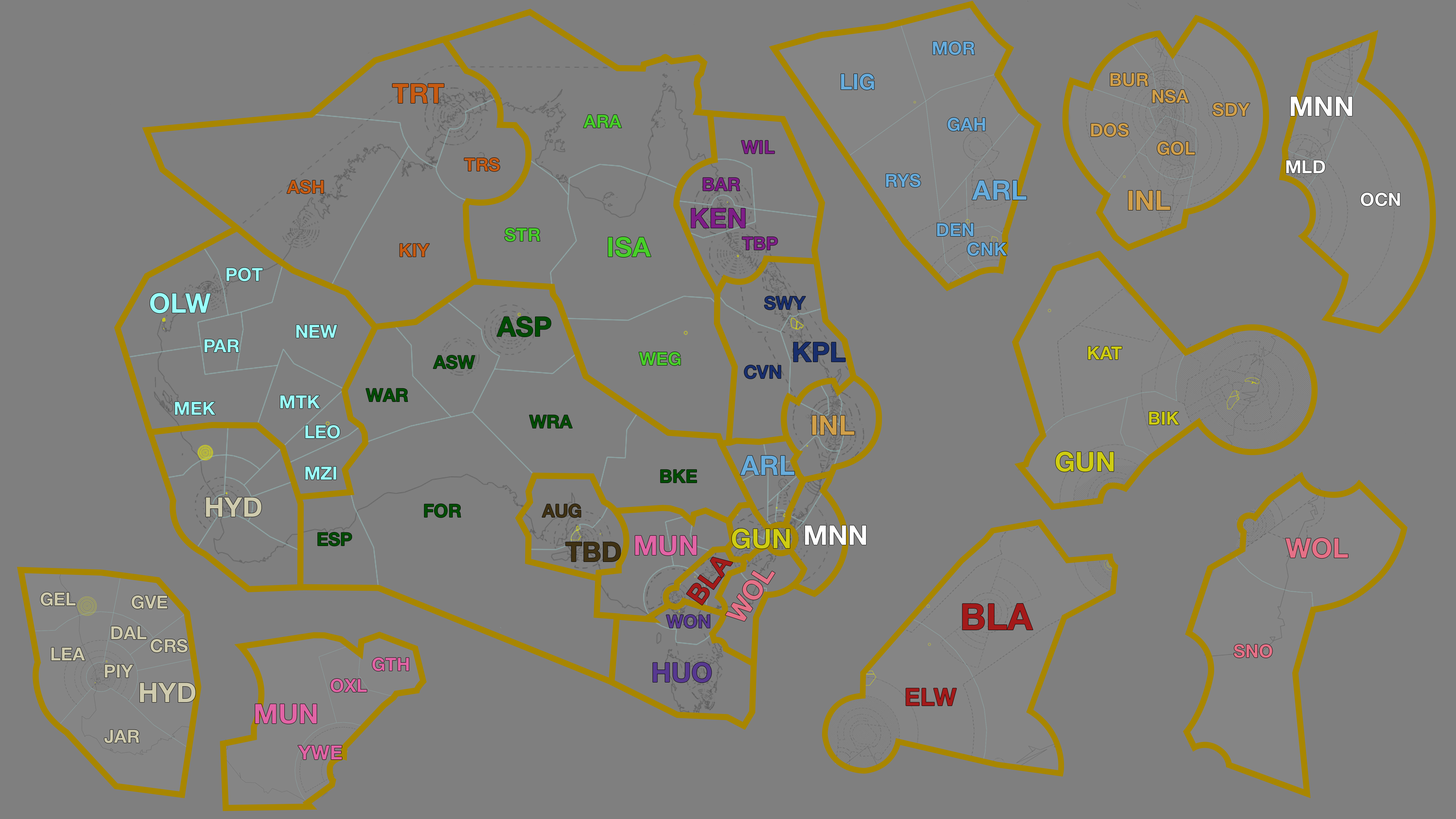
<style>
.page{position:relative;width:1456px;height:819px;background:#7f7f7f}
.page>*{position:absolute;margin:0}
.t1{font:18.2px "HelveticaNeue-Bold";color:#67acdc}
.t2{font:21.8px "HelveticaNeue-Bold";color:#67acdc}
.t3{font:18.2px "HelveticaNeue-Bold";color:#d09f4a}
.t4{font:27.3px "HelveticaNeue-Bold";color:#c75b12}
.t5{font:27.3px "HelveticaNeue-Bold";color:#ffffff}
.t6{font:18.2px "HelveticaNeue-Bold";color:#48cf29}
.t7{font:18.2px "HelveticaNeue-Bold";color:#7e1e87}
.t8{font:18.2px "HelveticaNeue-Bold";color:#c75b12}
.t9{font:18.2px "HelveticaNeue-Bold";color:#ffffff}
.t10{font:27.3px "HelveticaNeue-Bold";color:#67acdc}
.t11{font:27.3px "HelveticaNeue-Bold";color:#d09f4a}
.t12{font:27.3px "HelveticaNeue-Bold";color:#7e1e87}
.t13{font:27.3px "HelveticaNeue-Bold";color:#48cf29}
.t14{font:18.2px "HelveticaNeue-Bold";color:#9afffb}
.t15{font:27.3px "HelveticaNeue-Bold";color:#9afffb}
.t16{font:18.2px "HelveticaNeue-Bold";color:#182e6d}
.t17{font:27.3px "HelveticaNeue-Bold";color:#004d04}
.t18{font:27.3px "HelveticaNeue-Bold";color:#182e6d}
.t19{font:18.2px "HelveticaNeue-Bold";color:#cecc13}
.t20{font:18.2px "HelveticaNeue-Bold";color:#004d04}
.t21{font:27.3px "HelveticaNeue-Bold";color:#cecc13}
.t22{font:27.3px "HelveticaNeue-Bold";color:#cfcbae}
.t23{font:18.2px "HelveticaNeue-Bold";color:#403214}
.t24{font:27.3px "HelveticaNeue-Bold";color:#403214}
.t25{font:27.3px "HelveticaNeue-Bold";color:#e164a5}
.t26{font:27.3px "HelveticaNeue-Bold";color:#e57187}
.t27{font:27.3px "HelveticaNeue-Bold";color:#a31a1a}
.t28{font:18.2px "HelveticaNeue-Bold";color:#cfcbae}
.t29{font:36.6px "HelveticaNeue-Bold";color:#a31a1a}
.t30{font:18.2px "HelveticaNeue-Bold";color:#573890}
.t31{font:18.2px "HelveticaNeue-Bold";color:#e57187}
.t32{font:18.2px "HelveticaNeue-Bold";color:#e164a5}
.t33{font:27.3px "HelveticaNeue-Bold";color:#573890}
.t34{font:24.4px "HelveticaNeue-Bold";color:#a31a1a}
.t35{font:19.7px "HelveticaNeue-Bold";color:#e164a5}
</style>
<div class="page">
<p class="t1" style="left:933px;top:41px;width:42px;height:14px">MOR</p>
<p class="t2" style="left:841px;top:74px;width:33px;height:16px">LIG</p>
<p class="t3" style="left:1110px;top:73px;width:38px;height:13px">BUR</p>
<p class="t4" style="left:392px;top:83px;width:52px;height:20px">TRT</p>
<p class="t3" style="left:1152px;top:89px;width:37px;height:14px">NSA</p>
<p class="t5" style="left:1291px;top:96px;width:61px;height:20px">MNN</p>
<p class="t3" style="left:1213px;top:103px;width:37px;height:13px">SDY</p>
<p class="t6" style="left:583px;top:115px;width:39px;height:13px">ARA</p>
<p class="t1" style="left:948px;top:118px;width:37px;height:13px">GAH</p>
<p class="t3" style="left:1091px;top:123px;width:38px;height:14px">DOS</p>
<p class="t7" style="left:741px;top:140px;width:34px;height:14px">WIL</p>
<p class="t3" style="left:1157px;top:141px;width:38px;height:14px">GOL</p>
<p class="t8" style="left:464px;top:158px;width:36px;height:13px">TRS</p>
<p class="t9" style="left:1286px;top:160px;width:39px;height:13px">MLD</p>
<p class="t1" style="left:886px;top:174px;width:35px;height:13px">RYS</p>
<p class="t8" style="left:287px;top:180px;width:37px;height:14px">ASH</p>
<p class="t7" style="left:703px;top:177px;width:37px;height:14px">BAR</p>
<p class="t10" style="left:972px;top:180px;width:55px;height:20px">ARL</p>
<p class="t11" style="left:1128px;top:190px;width:42px;height:20px">INL</p>
<p class="t9" style="left:1360px;top:193px;width:40px;height:13px">OCN</p>
<p class="t12" style="left:691px;top:208px;width:54px;height:20px">KEN</p>
<p class="t6" style="left:505px;top:228px;width:35px;height:14px">STR</p>
<p class="t1" style="left:937px;top:223px;width:37px;height:13px">DEN</p>
<p class="t8" style="left:400px;top:243px;width:30px;height:14px">KIY</p>
<p class="t13" style="left:608px;top:237px;width:43px;height:20px">ISA</p>
<p class="t7" style="left:742px;top:237px;width:36px;height:13px">TBP</p>
<p class="t1" style="left:967px;top:242px;width:40px;height:14px">CNK</p>
<p class="t14" style="left:226px;top:268px;width:37px;height:13px">POT</p>
<p class="t15" style="left:150px;top:293px;width:61px;height:21px">OLW</p>
<p class="t16" style="left:764px;top:296px;width:42px;height:14px">SWY</p>
<p class="t17" style="left:497px;top:316px;width:54px;height:21px">ASP</p>
<p class="t14" style="left:296px;top:325px;width:41px;height:13px">NEW</p>
<p class="t14" style="left:204px;top:339px;width:35px;height:13px">PAR</p>
<p class="t6" style="left:639px;top:352px;width:42px;height:14px">WEG</p>
<p class="t18" style="left:794px;top:342px;width:52px;height:20px">KPL</p>
<p class="t19" style="left:1088px;top:346px;width:34px;height:13px">KAT</p>
<p class="t20" style="left:433px;top:355px;width:42px;height:14px">ASW</p>
<p class="t16" style="left:744px;top:365px;width:37px;height:14px">CVN</p>
<p class="t20" style="left:366px;top:388px;width:42px;height:14px">WAR</p>
<p class="t14" style="left:175px;top:402px;width:40px;height:13px">MEK</p>
<p class="t14" style="left:280px;top:395px;width:40px;height:13px">MTK</p>
<p class="t19" style="left:1149px;top:411px;width:30px;height:14px">BIK</p>
<p class="t14" style="left:305px;top:425px;width:35px;height:14px">LEO</p>
<p class="t20" style="left:529px;top:415px;width:44px;height:13px">WRA</p>
<p class="t11" style="left:812px;top:415px;width:43px;height:20px">INL</p>
<p class="t10" style="left:740px;top:455px;width:55px;height:20px">ARL</p>
<p class="t21" style="left:1056px;top:451px;width:58px;height:21px">GUN</p>
<p class="t14" style="left:305px;top:466px;width:31px;height:14px">MZI</p>
<p class="t20" style="left:660px;top:469px;width:37px;height:14px">BKE</p>
<p class="t22" style="left:206px;top:497px;width:56px;height:20px">HYD</p>
<p class="t20" style="left:424px;top:504px;width:37px;height:14px">FOR</p>
<p class="t23" style="left:542px;top:504px;width:39px;height:14px">AUG</p>
<p class="t20" style="left:318px;top:532px;width:34px;height:14px">ESP</p>
<p class="t21" style="left:732px;top:528px;width:58px;height:21px">GUN</p>
<p class="t5" style="left:805px;top:525px;width:61px;height:20px">MNN</p>
<p class="t24" style="left:566px;top:542px;width:55px;height:20px">TBD</p>
<p class="t25" style="left:635px;top:535px;width:62px;height:20px">MUN</p>
<p class="t26" style="left:1285px;top:538px;width:63px;height:21px">WOL</p>
<p class="t27" style="left:686px;top:557px;width:47px;height:48px;rotate:-55deg">BLA</p>
<p class="t26" style="left:725px;top:570px;width:50px;height:51px;rotate:-57deg">WOL</p>
<p class="t28" style="left:41px;top:592px;width:35px;height:14px">GEL</p>
<p class="t28" style="left:132px;top:595px;width:36px;height:14px">GVE</p>
<p class="t29" style="left:962px;top:604px;width:71px;height:26px">BLA</p>
<p class="t30" style="left:666px;top:615px;width:44px;height:13px">WON</p>
<p class="t28" style="left:111px;top:626px;width:36px;height:13px">DAL</p>
<p class="t28" style="left:151px;top:639px;width:37px;height:14px">CRS</p>
<p class="t28" style="left:51px;top:647px;width:34px;height:13px">LEA</p>
<p class="t31" style="left:1234px;top:644px;width:38px;height:14px">SNO</p>
<p class="t28" style="left:105px;top:664px;width:28px;height:14px">PIY</p>
<p class="t32" style="left:372px;top:657px;width:37px;height:14px">GTH</p>
<p class="t33" style="left:653px;top:662px;width:59px;height:21px">HUO</p>
<p class="t22" style="left:140px;top:682px;width:56px;height:20px">HYD</p>
<p class="t32" style="left:330px;top:679px;width:37px;height:13px">OXL</p>
<p class="t34" style="left:906px;top:688px;width:51px;height:18px">ELW</p>
<p class="t25" style="left:255px;top:704px;width:62px;height:20px">MUN</p>
<p class="t28" style="left:104px;top:730px;width:36px;height:13px">JAR</p>
<p class="t35" style="left:298px;top:745px;width:44px;height:14px">YWE</p>
</div>
